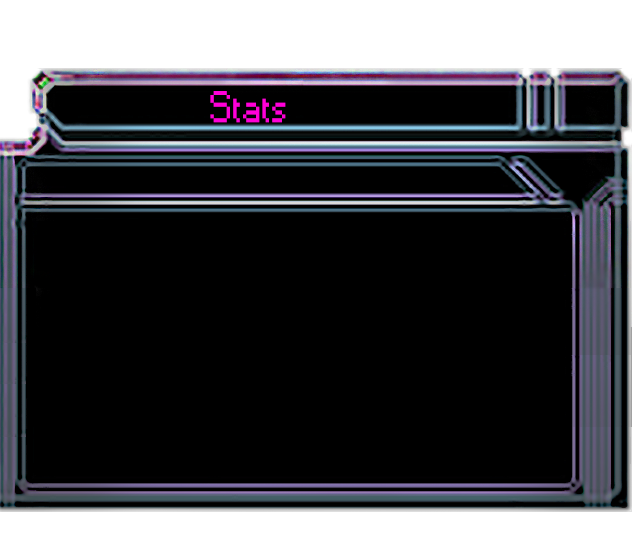
<style>
.page{position:relative;width:640px;height:537px;background:#000000}
.page>*{position:absolute;margin:0}
.t1{font:41.7px "Small Fonts";color:#ff00d8}
</style>
<div class="page">
<p class="t1" style="left:210px;top:91px;width:76px;height:32px">Stats</p>
</div>
